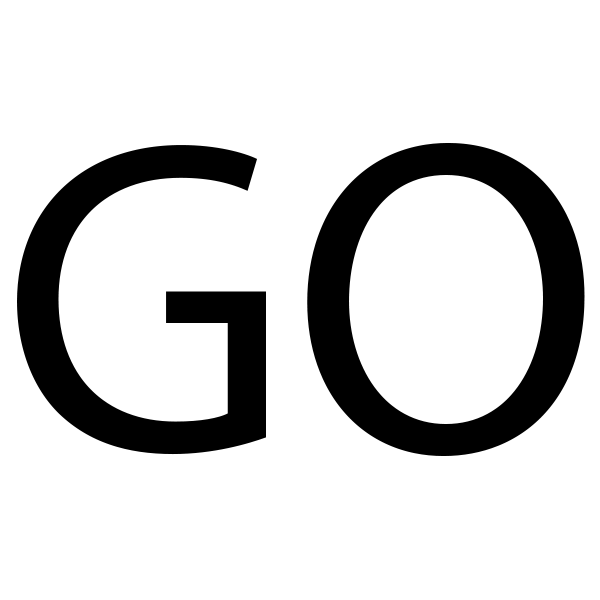
<style>
.page{position:relative;width:600px;height:600px;background:#ffffff}
.page>*{position:absolute;margin:0}
.t1{font:450px "MyriadPro-Regular";color:#000000}
</style>
<div class="page">
<p class="t1" style="left:17px;top:142px;width:568px;height:314px">GO</p>
</div>
